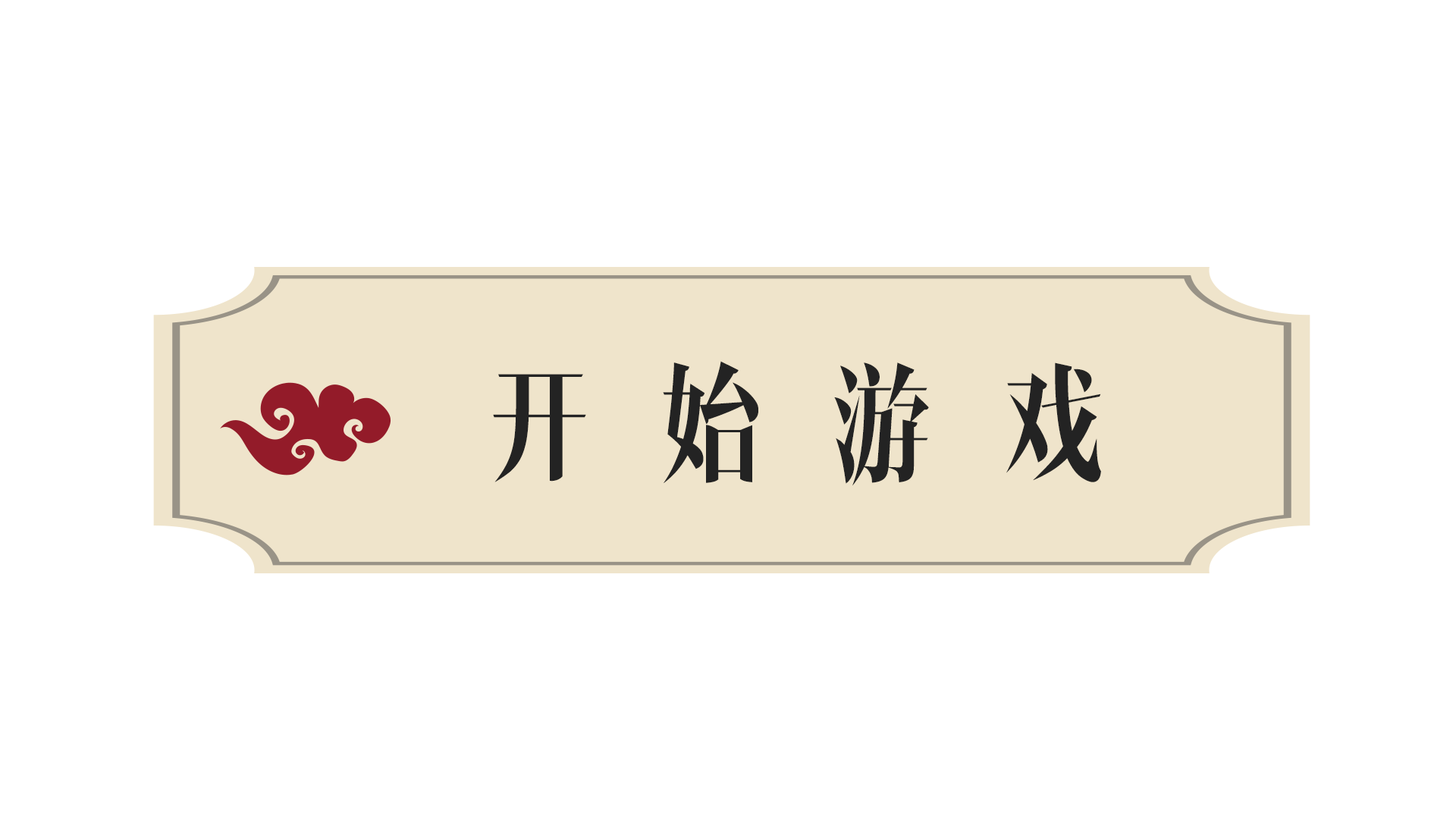
<style>
.page{position:relative;width:1456px;height:819px;background:#ffffff}
.page>*{position:absolute;margin:0}
.t1{font:132.7px "RTWSJyunYaG0v1-Regular";letter-spacing:0.54em;color:#232323;text-transform:uppercase}
</style>
<div class="page">
<p class="t1" style="left:493px;top:361px;width:608px;height:125px">开始游戏</p>
</div>
